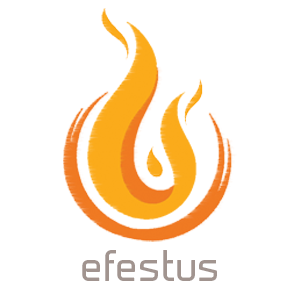
<style>
.page{position:relative;width:300px;height:300px;background:#ffffff}
.page>*{position:absolute;margin:0}
.t1{font:41.7px "Prime-Regular";color:#a1948f}
</style>
<div class="page">
<p class="t1" style="left:82px;top:250px;width:135px;height:31px">efestus</p>
</div>
